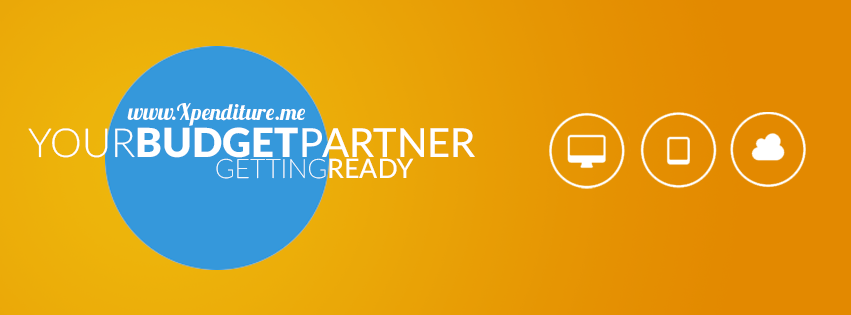
<style>
.page{position:relative;width:851px;height:315px}
.page>*{position:absolute;margin:0}
.t1{font:22.7px "Lobster1.3";color:#ffffff}
.t2{font:40px "Lato-Medium";color:#ffffff}
.t3{font:40px "Lato-Light";color:#ffffff}
.t4{font:40px "Lato-Black";color:#ffffff}
.t5{font:26.7px "Lato-Thin";color:#ffffff}
.t6{font:26.7px "Lato-Medium";color:#ffffff}
</style>
<div class="page">
<p class="t1" style="left:127px;top:103px;width:178px;height:23px">www.Xpenditure.me</p>
<p class="t2" style="left:28px;top:127px;width:447px;height:31px"><span class="t3">YOUR</span><span class="t4">BUDGET</span>PARTNER</p>
<p class="t5" style="left:216px;top:158px;width:198px;height:21px">GETTING<span class="t6">READY</span></p>
</div>
